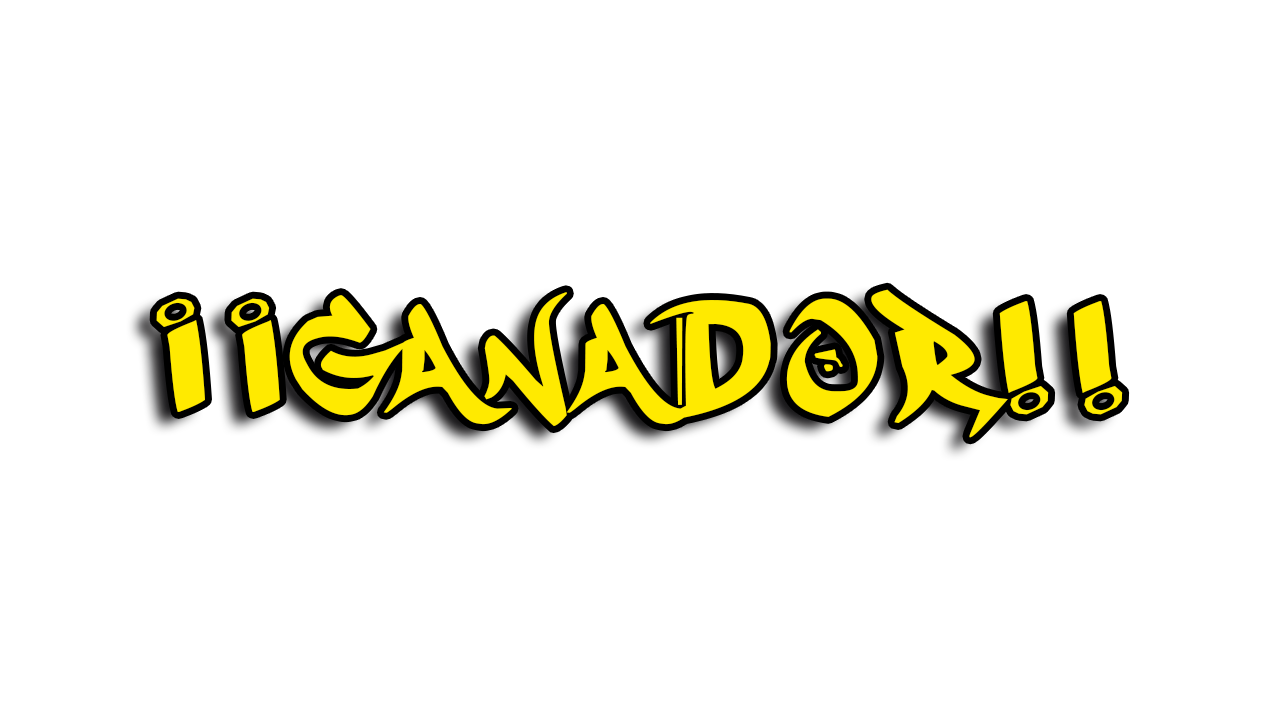
<style>
.page{position:relative;width:1280px;height:720px;background:#ffffff}
.page>*{position:absolute;margin:0}
.t1{font:125px "MESTIZOSUNIDOS-URBANHOOKUPZ";letter-spacing:0.18em;color:#ffea00}
</style>
<div class="page">
<p class="t1" style="left:289px;top:289px;width:834px;height:149px">GANAdor!!</p>
<p class="t1" style="left:156px;top:298px;width:124px;height:114px;rotate:180deg">!!</p>
</div>
